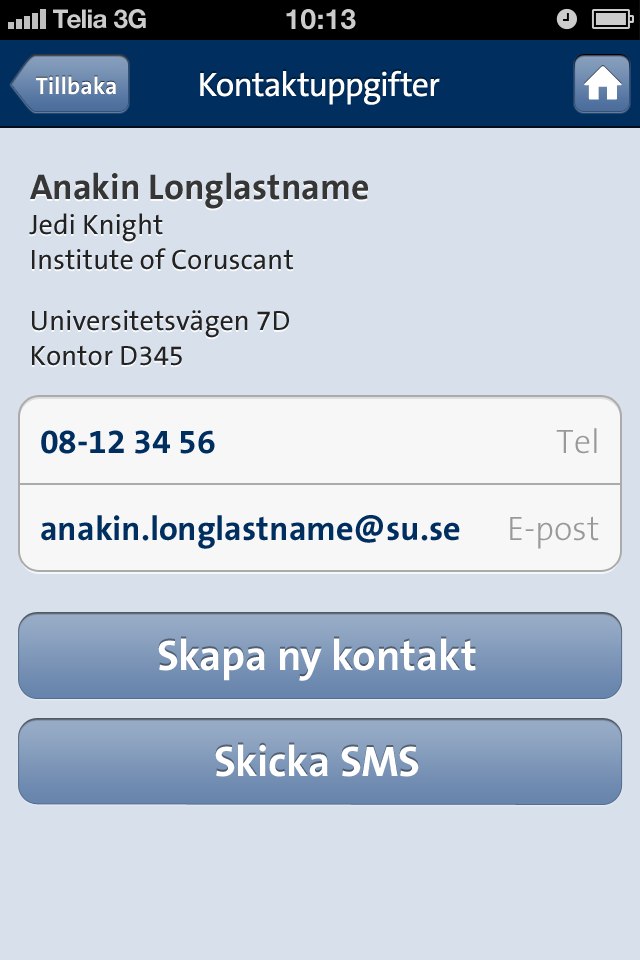
<style>
.page{position:relative;width:640px;height:960px;background:#d7e0eb}
.page>*{position:absolute;margin:0}
.t1{font:26px "HelveticaNeue-Bold";color:#cccccc}
.t2{font:26px "HelveticaNeue-Bold";color:#cccccc;text-transform:uppercase}
.t3{font:28px "HelveticaNeue-Bold";color:#cccccc;text-transform:uppercase}
.t4{font:24px "TheSansB-W7Bold";color:#ffffff}
.t5{font:34px "TheSansB-W5Plain";letter-spacing:-0.015em;color:#ffffff}
.t6{font:28px/35px "TheSansB-W5Plain";color:#222222}
.t7{font:36px/46px "TheSansB-W7Bold";color:#363636}
.t8{font:34px/87px "TheSansB-W7Bold";color:#002e5f}
.t9{font:34px/87px "TheSansB-W3Light";color:#999999}
.t10{font:43px "TheSansB-W7Bold";color:#ffffff}
</style>
<div class="page">
<p class="t1" style="left:53px;top:9px;width:54px;height:20px">Telia</p>
<p class="t2" style="left:114px;top:9px;width:32px;height:20px">3G</p>
<p class="t3" style="left:286px;top:9px;width:70px;height:21px">10:13</p>
<p class="t4" style="left:36px;top:76px;width:80px;height:19px">Tillbaka</p>
<p class="t5" style="left:200px;top:70px;width:240px;height:35px">Kontaktuppgifter</p>
<p class="t6" style="left:29px;top:172px;width:339px;height:194px"><span class="t7">Anakin Longlastname<br></span>Jedi Knight<br>Institute of Coruscant<br><br>Universitetsvägen 7D<br>Kontor D345</p>
<p class="t8" style="left:41px;top:430px;width:419px;height:119px">08-12 34 56<br>anakin.longlastname@su.se</p>
<p class="t9" style="left:510px;top:428px;width:89px;height:121px;text-align:right">Tel<br>E-post</p>
<p class="t10" style="left:158px;top:638px;width:318px;height:43px">Skapa ny kontakt</p>
<p class="t10" style="left:215px;top:744px;width:204px;height:33px">Skicka SMS</p>
</div>
